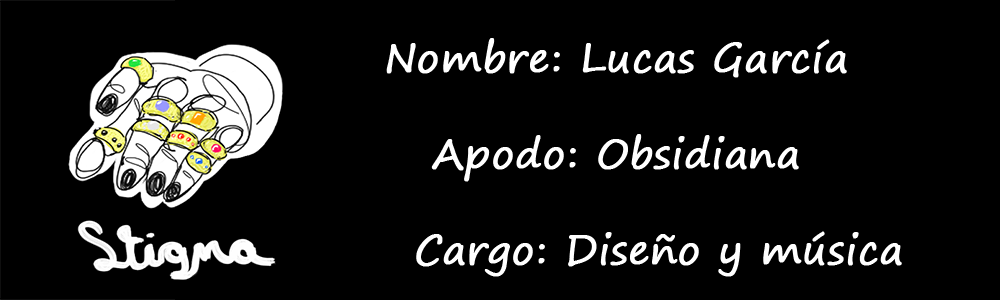
<style>
.page{position:relative;width:1000px;height:300px;background:#000000}
.page>*{position:absolute;margin:0}
.t1{font:40px "SegoePrint";color:#ffffff;font-weight:bold}
</style>
<div class="page">
<p class="t1" style="left:386px;top:38px;width:516px;height:239px;text-align:center">Nombre: Lucas García<br><br>Apodo: Obsidiana<br><br>     Cargo: Diseño y música</p>
</div>
